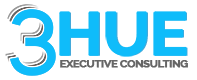
<style>
.page{position:relative;width:197px;height:80px;background:#ffffff}
.page>*{position:absolute;margin:0}
.t1{font:59.8px "Raleway-Bold";letter-spacing:-0.025em;color:#0fbcfa;font-weight:bold;scale:1.05 1}
.t2{font:9.2px "Raleway-Bold";letter-spacing:-0.025em;color:#666666;font-weight:bold;scale:1.15 1}
</style>
<div class="page">
<p class="t1" style="left:60px;top:12px;width:128px;height:44px">HUE</p>
<p class="t2" style="left:60px;top:60px;width:128px;height:8px">EXECUTIVE CONSULTING</p>
</div>
